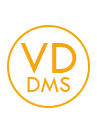
<style>
.page{position:relative;width:97px;height:122px;background:#ffffff}
.page>*{position:absolute;margin:0}
.t1{font:48px "TwCenMT-Regular";color:#f5a608}
.t2{font:24px "TwCenMT-Regular";color:#f5a608}
</style>
<div class="page">
<p class="t1" style="left:20px;top:43px;width:57px;height:31px">VD</p>
<p class="t2" style="left:27px;top:77px;width:44px;height:15px">DMS</p>
</div>
